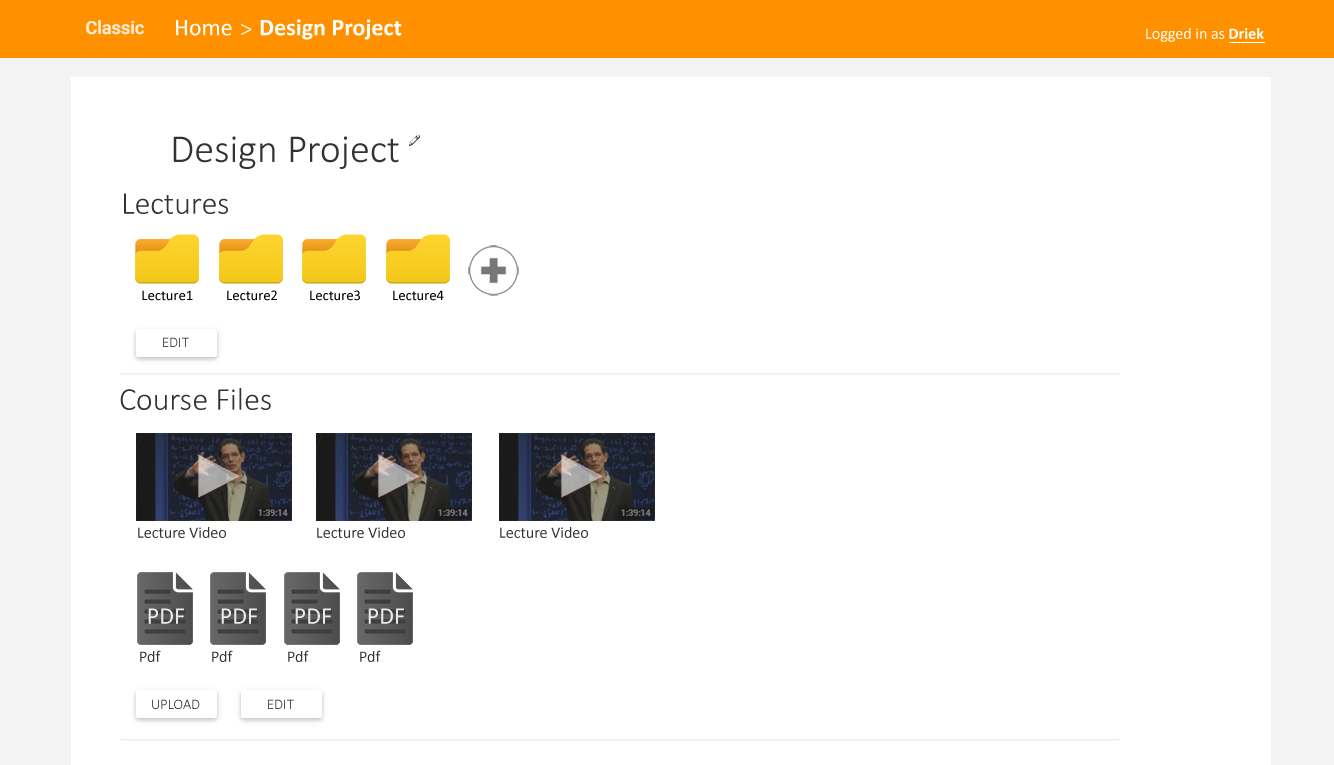
<style>
.page{position:relative;width:1334px;height:765px;background:#ffffff}
.page>*{position:absolute;margin:0}
.t1{font:24px "Calibri";color:#ffffff}
.t2{font:24px "Calibri-Light";color:#ffffff}
.t3{font:24px "Calibri-Bold";color:#ffffff}
.t4{font:16px "Calibri";color:#ffffff}
.t5{font:16px "Calibri-Bold";color:#ffffff}
.t6{font:40px "Calibri-Light";color:#333333}
.t7{font:32px "Calibri-Light";color:#333333}
.t8{font:14.7px "Calibri";color:#000000}
.t9{font:14.7px "Calibri-Light"}
.t10{font:16px "Calibri";color:#333333}
</style>
<div class="page">
<p class="t1" style="left:176px;top:20px;width:56px;height:16px">Home</p>
<p class="t2" style="left:241px;top:24px;width:11px;height:11px">&gt;</p>
<p class="t3" style="left:260px;top:19px;width:142px;height:21px">Design Project</p>
<p class="t4" style="left:1146px;top:28px;width:118px;height:14px">Logged in as <span class="t5">Driek</span></p>
<p class="t6" style="left:173px;top:136px;width:226px;height:33px">Design Project</p>
<p class="t7" style="left:124px;top:193px;width:104px;height:21px">Lectures</p>
<p class="t8" style="left:142px;top:290px;width:51px;height:11px">Lecture1</p>
<p class="t8" style="left:227px;top:290px;width:50px;height:11px">Lecture2</p>
<p class="t8" style="left:310px;top:290px;width:50px;height:11px">Lecture3</p>
<p class="t8" style="left:393px;top:290px;width:51px;height:11px">Lecture4</p>
<p class="t9" style="left:163px;top:337px;width:26px;height:10px">EDIT</p>
<p class="t7" style="left:120px;top:388px;width:151px;height:22px">Course Files</p>
<p class="t10" style="left:138px;top:527px;width:88px;height:11px">Lecture Video</p>
<p class="t10" style="left:317px;top:527px;width:88px;height:11px">Lecture Video</p>
<p class="t10" style="left:500px;top:527px;width:88px;height:11px">Lecture Video</p>
<p class="t10" style="left:140px;top:650px;width:21px;height:12px">Pdf</p>
<p class="t10" style="left:212px;top:650px;width:21px;height:12px">Pdf</p>
<p class="t10" style="left:288px;top:650px;width:21px;height:12px">Pdf</p>
<p class="t10" style="left:360px;top:650px;width:21px;height:12px">Pdf</p>
<p class="t9" style="left:152px;top:699px;width:48px;height:10px">UPLOAD</p>
<p class="t9" style="left:268px;top:699px;width:26px;height:10px">EDIT</p>
</div>
